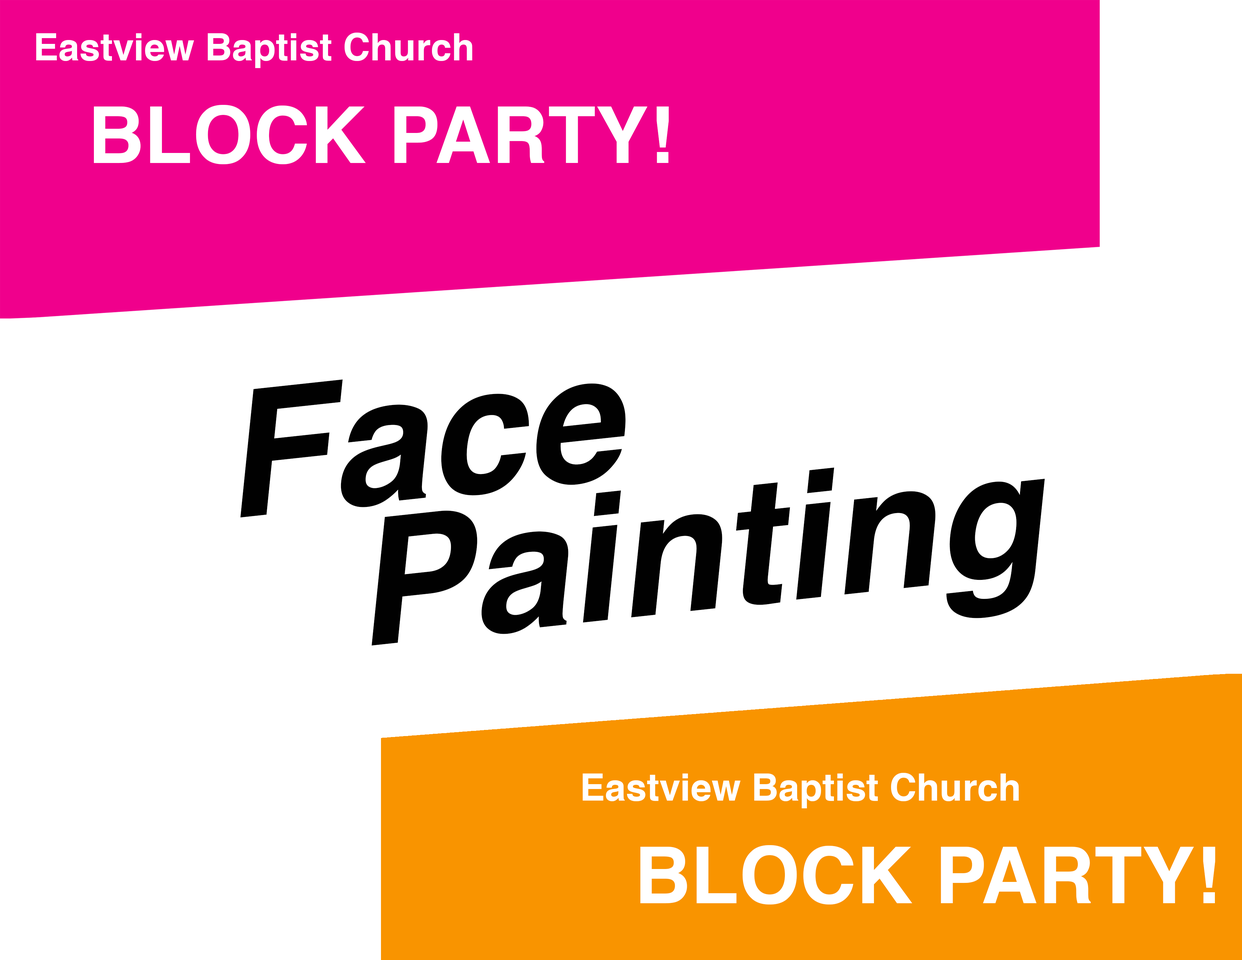
<style>
.page{position:relative;width:1242px;height:960px;background:#ffffff}
.page>*{position:absolute;margin:0}
.t1{font:37.6px "Helvetica-Bold";color:#ffffff}
.t2{font:78.4px "Helvetica-Bold";color:#ffffff}
.t3{font:175.7px/47.1px "Helvetica-BoldOblique";color:#010101}
</style>
<div class="page">
<p class="t1" style="left:36px;top:33px;width:436px;height:35px">Eastview Baptist Church</p>
<p class="t2" style="left:94px;top:105px;width:575px;height:59px">BLOCK PARTY!</p>
<p class="t3" style="left:240px;top:379px;width:805px;height:267px;rotate:-6deg">Face<br><br><br>          Painting</p>
<p class="t1" style="left:583px;top:773px;width:436px;height:35px">Eastview Baptist Church</p>
<p class="t2" style="left:640px;top:845px;width:575px;height:59px">BLOCK PARTY!</p>
</div>
